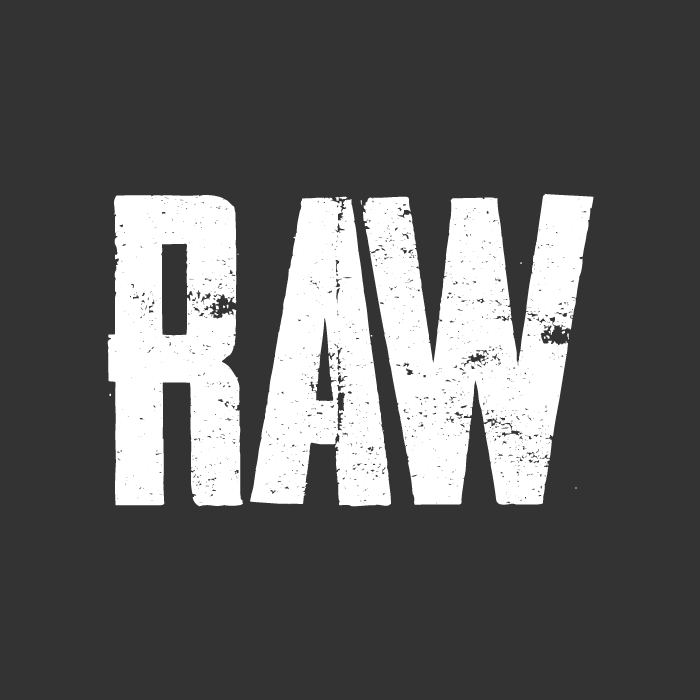
<style>
.page{position:relative;width:700px;height:700px;background:#333333}
.page>*{position:absolute;margin:0}
.t1{font:367.6px "AWAKENNINGPersonalUse";letter-spacing:-0.05em;color:#ffffff;font-weight:bold}
</style>
<div class="page">
<p class="t1" style="left:107px;top:193px;width:487px;height:314px">RAW</p>
</div>
